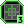
<style>
.page{position:relative;width:24px;height:24px}
.page>*{position:absolute;margin:0}
.t1{font:9px "Montserrat-Bold";color:#000000}
</style>
<div class="page">
<p class="t1" style="left:18px;top:16px;width:5px;height:7px">3</p>
</div>
